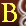
<style>
.page{position:relative;width:26px;height:26px}
.page>*{position:absolute;margin:0}
.t1{font:28px "GoudyOldStyleT-Regular";color:#fffd53}
</style>
<div class="page">
<p class="t1" style="left:1px;top:3px;width:16px;height:19px">B</p>
<p class="t1" style="left:1px;top:3px;width:16px;height:19px">B</p>
<p class="t1" style="left:1px;top:3px;width:16px;height:19px">B</p>
<p class="t1" style="left:1px;top:3px;width:16px;height:19px">B</p>
</div>
